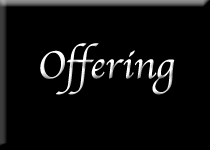
<style>
.page{position:relative;width:210px;height:150px;background:#000000}
.page>*{position:absolute;margin:0}
.t1{font:40px "Apple-Chancery";color:#ffffff}
</style>
<div class="page">
<p class="t1" style="left:40px;top:43px;width:135px;height:52px">Offering</p>
</div>
